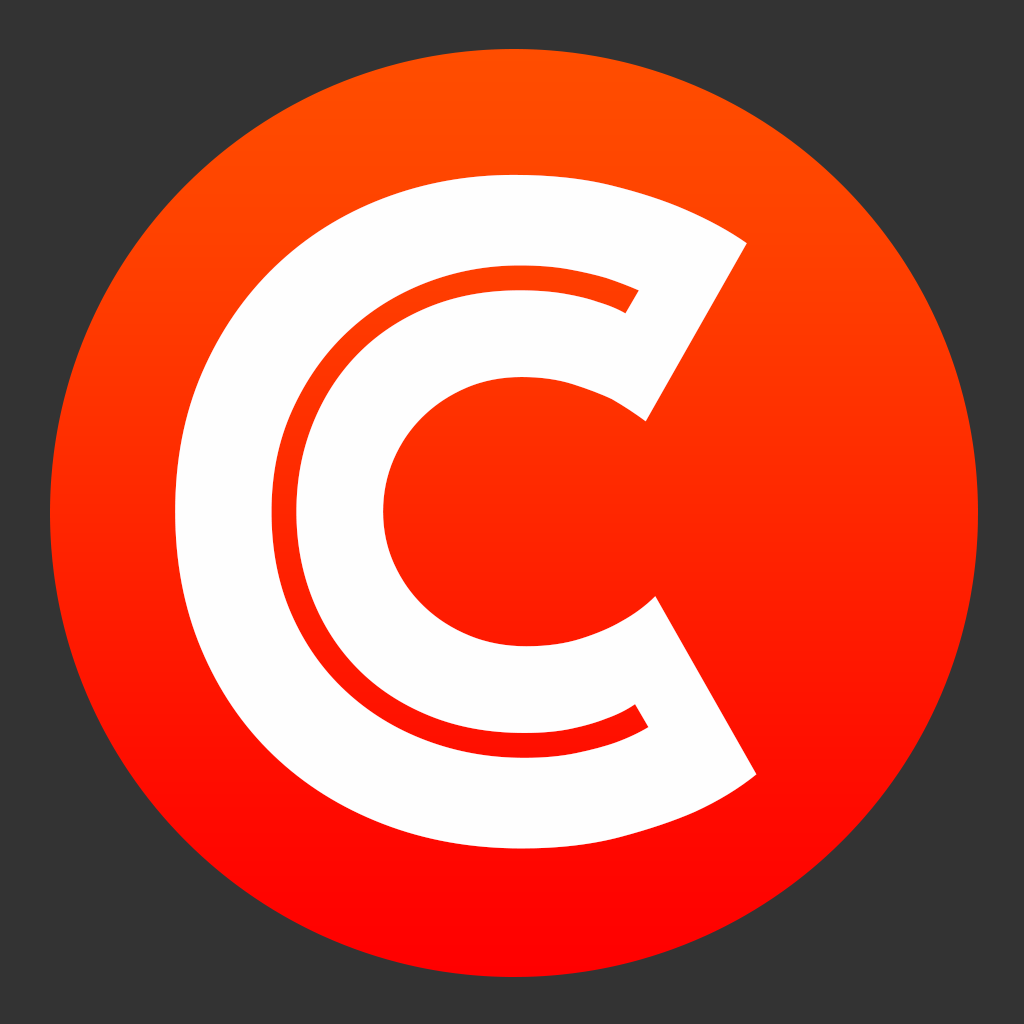
<style>
.page{position:relative;width:1024px;height:1024px;background:#333333}
.page>*{position:absolute;margin:0}
.t1{font:962.2px "Phosphate-Inline";letter-spacing:-0.025em;color:#fefefe}
</style>
<div class="page">
<p class="t1" style="left:175px;top:174px;width:582px;height:675px">C</p>
</div>
